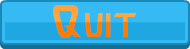
<style>
.page{position:relative;width:190px;height:49px;background:#35baf3}
.page>*{position:absolute;margin:0}
.t1{font:36px "Brassett"}
</style>
<div class="page">
<p class="t1" style="left:53px;top:5px;width:84px;height:33px">Quit</p>
</div>
